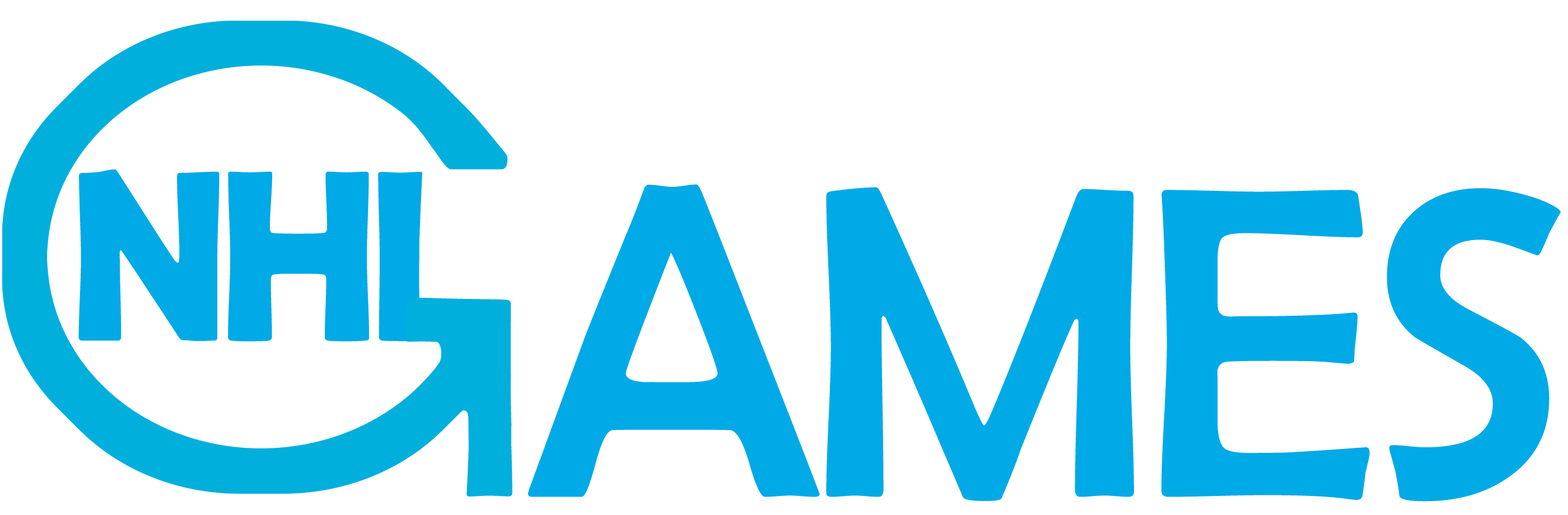
<style>
.page{position:relative;width:1568px;height:515px;background:#ffffff}
.page>*{position:absolute;margin:0}
.t1{font:246.4px "BerlinSansFBDemi-Bold";letter-spacing:-0.05em;color:#00aae6;scale:0.87 1}
.t2{font:448px "BerlinSansFB-Reg";letter-spacing:-0.04em;color:#00aae6}
</style>
<div class="page">
<p class="t1" style="left:78px;top:169px;width:405px;height:174px">NHL</p>
<p class="t2" style="left:528px;top:184px;width:1033px;height:318px">AMES</p>
</div>
